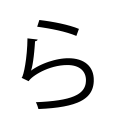
<style>
.page{position:relative;width:128px;height:128px;background:#ffffff}
.page>*{position:absolute;margin:0}
.t1{font:100.9px "KozGoPr6N-Regular";color:#000000}
</style>
<div class="page">
<p class="t1" style="left:21px;top:20px;width:73px;height:89px">ら</p>
</div>
